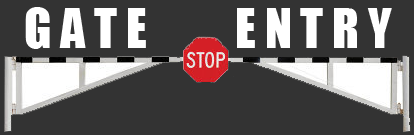
<style>
.page{position:relative;width:414px;height:135px;background:#333333}
.page>*{position:absolute;margin:0}
.t1{font:50px "Impact";color:#ffffff}
.t2{font:50px "Impact";color:#147ccb}
</style>
<div class="page">
<p class="t1" style="left:25px;top:7px;width:367px;height:42px"><span class="t2">  </span>G A T E          E N T R Y</p>
</div>
